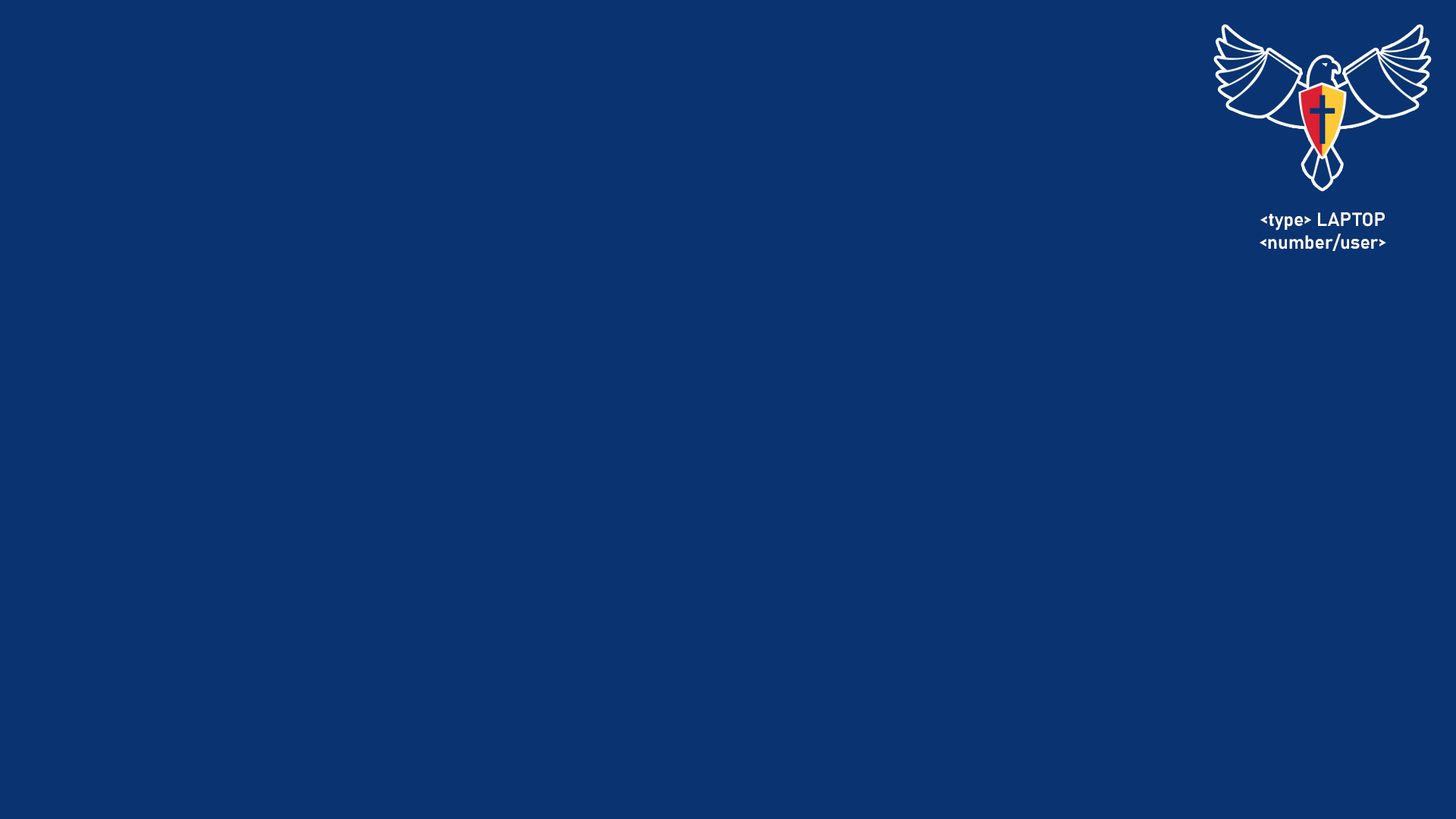
<style>
.page{position:relative;width:1456px;height:819px;background:#0a3371}
.page>*{position:absolute;margin:0}
.t1{font:18.8px "Bahnschrift-SemiBold";color:#ffffff}
</style>
<div class="page">
<p class="t1" style="left:1260px;top:212px;width:126px;height:39px;text-align:center">&lt;type&gt; LAPTOP<br>&lt;number/user&gt;</p>
</div>
